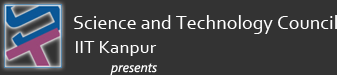
<style>
.page{position:relative;width:337px;height:75px;background:#333333}
.page>*{position:absolute;margin:0}
.t1{font:20px "Corbel";color:#ffffff}
.t2{font:13px "SegoeUI-Italic";color:#ffffff}
</style>
<div class="page">
<p class="t1" style="left:74px;top:15px;width:263px;height:19px">Science and Technology Council</p>
<p class="t2" style="left:110px;top:63px;width:47px;height:13px">presents</p>
</div>
